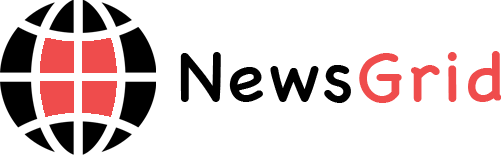
<style>
.page{position:relative;width:501px;height:155px;background:#ffffff}
.page>*{position:absolute;margin:0}
.t1{font:71px "ChalkboardSE-Regular";letter-spacing:0.05em;color:#000000}
.t2{font:71px "ChalkboardSE-Regular";letter-spacing:0.05em;color:#ef4c4c}
</style>
<div class="page">
<p class="t1" style="left:180px;top:51px;width:322px;height:52px">News<span class="t2">Grid</span></p>
</div>
